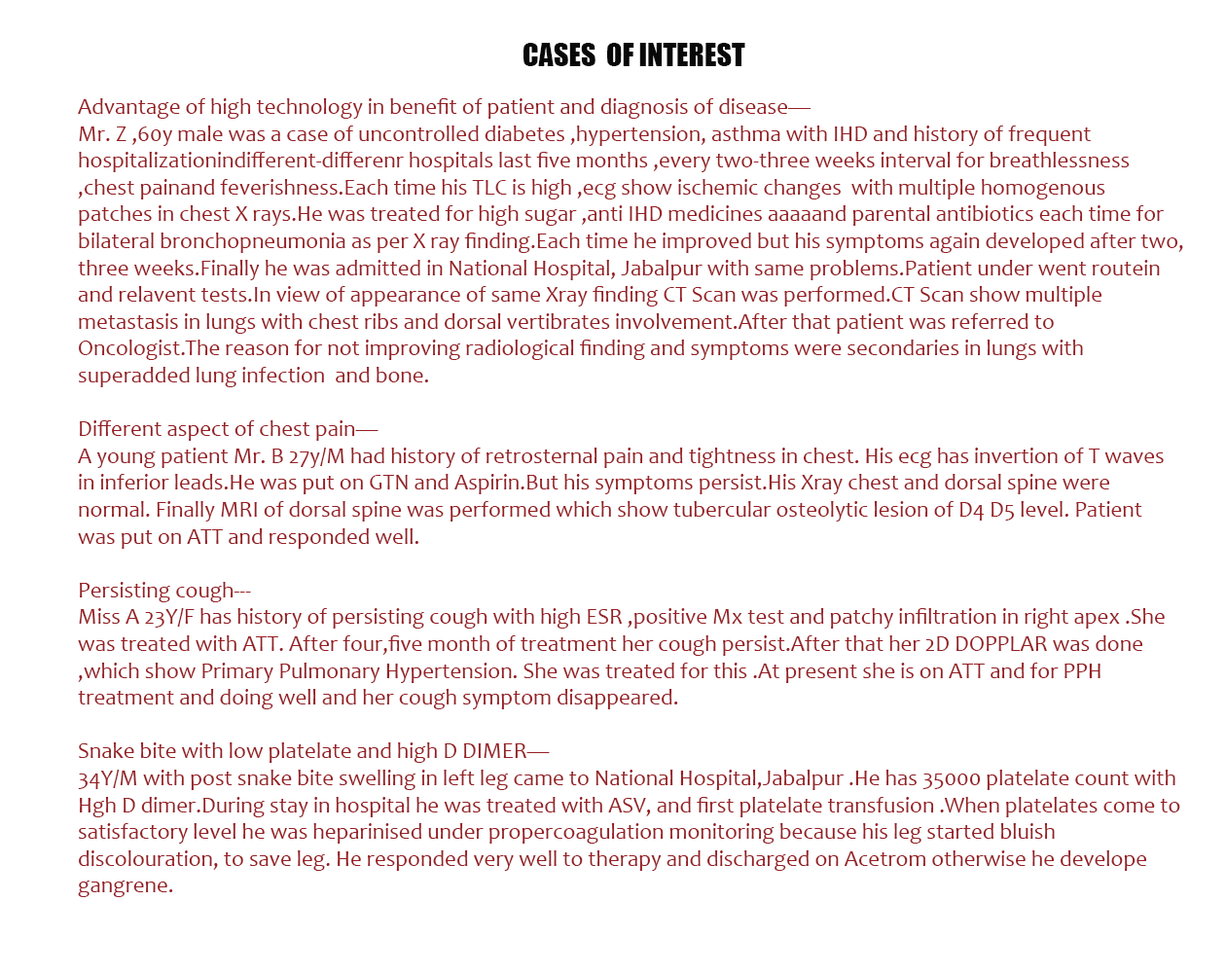
<style>
.page{position:relative;width:1226px;height:973px;background:#ffffff}
.page>*{position:absolute;margin:0}
.t1{font:22.4px "Candara";color:#961f24}
.t2{font:29.2px "Impact";color:#961f24}
.t3{font:29.2px "Impact";color:#080808}
</style>
<div class="page">
<p class="t1" style="left:78px;top:43px;width:1105px;height:854px;text-align:center"><span class="t2"> </span><span class="t3">CASES  OF INTEREST<br><br></span>Advantage of high technology in benefit of patient and diagnosis of disease—<br>Mr. Z ,60y male was a case of uncontrolled diabetes ,hypertension, asthma with IHD and history of frequent hospitalizationindifferent-differenr hospitals last five months ,every two-three weeks interval for breathlessness ,chest painand feverishness.Each time his TLC is high ,ecg show ischemic changes  with multiple homogenous patches in chest X rays.He was treated for high sugar ,anti IHD medicines aaaaand parental antibiotics each time for bilateral bronchopneumonia as per X ray finding.Each time he improved but his symptoms again developed after two, three weeks.Finally he was admitted in National Hospital, Jabalpur with same problems.Patient under went routein and relavent tests.In view of appearance of same Xray finding CT Scan was performed.CT Scan show multiple metastasis in lungs with chest ribs and dorsal vertibrates involvement.After that patient was referred to  Oncologist.The reason for not improving radiological finding and symptoms were secondaries in lungs with superadded lung infection  and bone.<br><br>Different aspect of chest pain—<br>A young patient Mr. B 27y/M had history of retrosternal pain and tightness in chest. His ecg has invertion of T waves  in inferior leads.He was put on GTN and Aspirin.But his symptoms persist.His Xray chest and dorsal spine were normal. Finally MRI of dorsal spine was performed which show tubercular osteolytic lesion of D4 D5 level. Patient was put on ATT and responded well.<br><br>Persisting cough---<br>Miss A 23Y/F has history of persisting cough with high ESR ,positive Mx test and patchy infiltration in right apex .She was treated with ATT. After four,five month of treatment her cough persist.After that her 2D DOPPLAR was done ,which show Primary Pulmonary Hypertension. She was treated for this .At present she is on ATT and for PPH treatment and doing well and her cough symptom disappeared.<br><br>Snake bite with low platelate and high D DIMER—<br>34Y/M with post snake bite swelling in left leg came to National Hospital,Jabalpur .He has 35000 platelate count with Hgh D dimer.During stay in hospital he was treated with ASV, and first platelate transfusion .When platelates come to satisfactory level he was heparinised under propercoagulation monitoring because his leg started bluish discolouration, to save leg. He responded very well to therapy and discharged on Acetrom otherwise he develope gangrene.</p>
</div>
